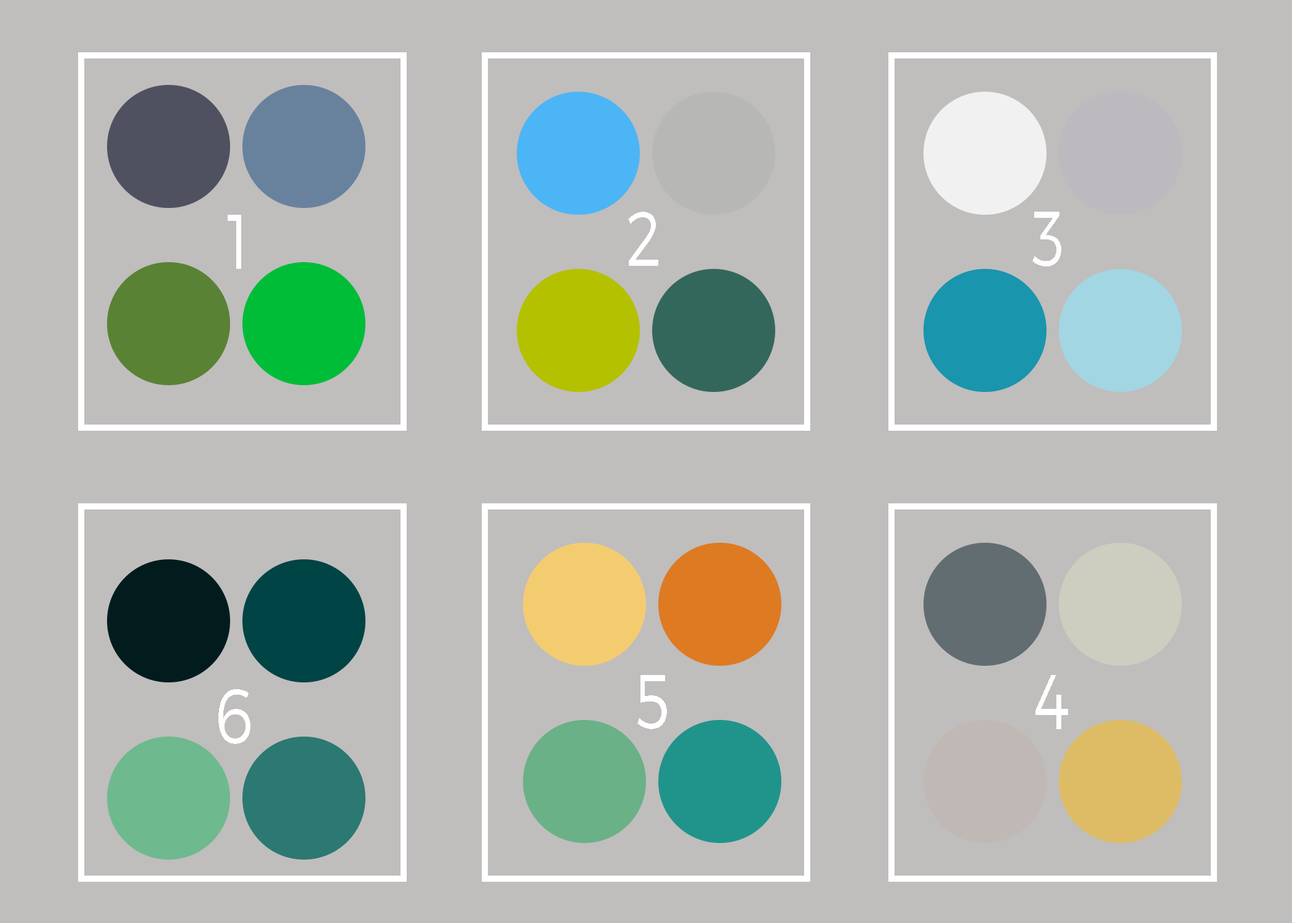
<style>
.page{position:relative;width:1292px;height:923px;background:#c0bdbd}
.page>*{position:absolute;margin:0}
.t1{font:76.9px "Montserrat-Light";letter-spacing:0.06em;color:#ffffff;text-transform:uppercase;scale:0.8 1}
.t2{font:76.9px "Montserrat-Light";letter-spacing:0.06em;color:#fffefe;text-transform:uppercase;scale:0.8 1}
</style>
<div class="page">
<p class="t1" style="left:228px;top:215px;width:13px;height:54px">1</p>
<p class="t1" style="left:628px;top:212px;width:30px;height:54px">2</p>
<p class="t2" style="left:1032px;top:212px;width:29px;height:54px">3</p>
<p class="t1" style="left:637px;top:675px;width:30px;height:54px">5</p>
<p class="t1" style="left:1035px;top:675px;width:33px;height:54px">4</p>
<p class="t1" style="left:218px;top:689px;width:32px;height:55px">6</p>
</div>
